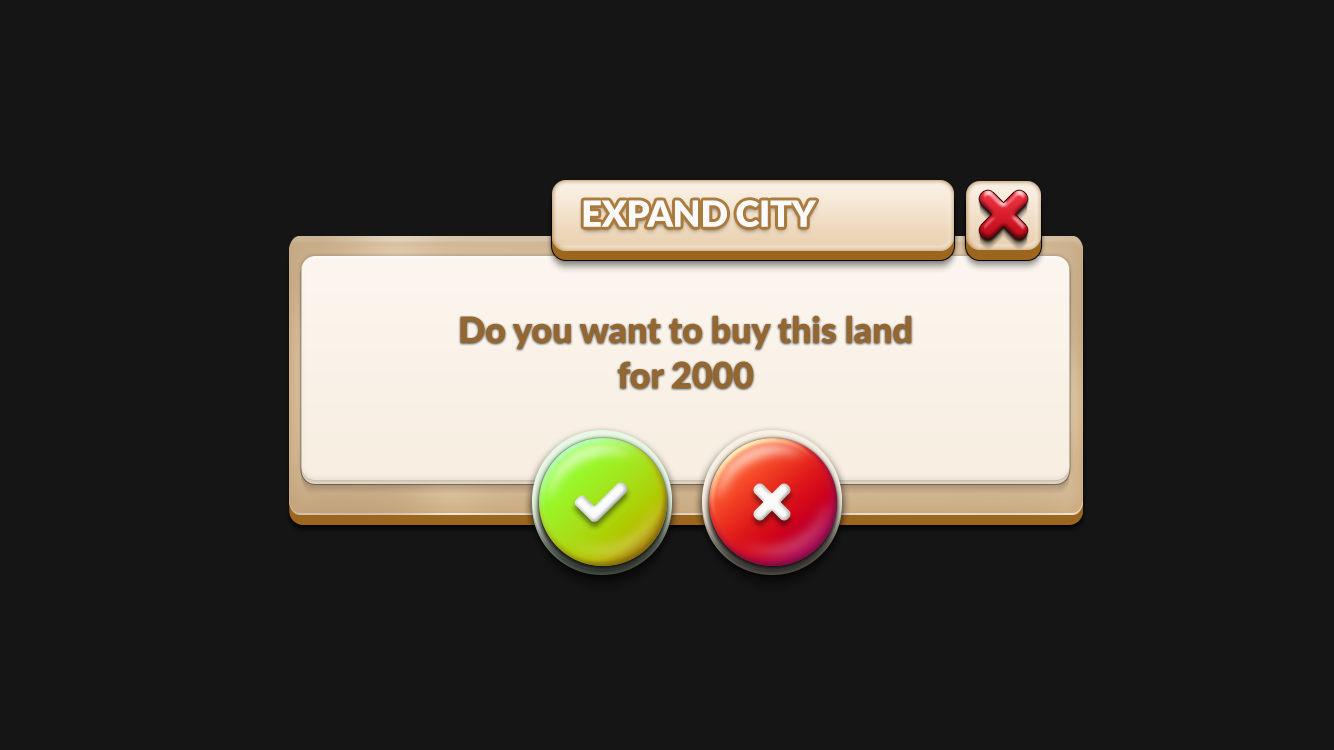
<style>
.page{position:relative;width:1334px;height:750px;background:#161515}
.page>*{position:absolute;margin:0}
.t1{font:36.2px "Lato-Black";letter-spacing:-0.01em;color:#fbfafa}
.t2{font:36.2px/45.3px "Lato-Black";letter-spacing:-0.01em;color:#8d5d1c}
</style>
<div class="page">
<p class="t1" style="left:583px;top:200px;width:234px;height:27px">EXPAND CITY</p>
<p class="t2" style="left:460px;top:315px;width:452px;height:74px;text-align:center;opacity:0.95">Do you want to buy this land<br>for 2000</p>
</div>
